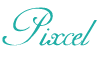
<style>
.page{position:relative;width:101px;height:70px;background:#ffffff}
.page>*{position:absolute;margin:0}
.t1{font:60px "AdineKirnberg-Regular";color:#1faea6}
</style>
<div class="page">
<p class="t1" style="left:2px;top:7px;width:95px;height:39px">Pixcel</p>
</div>
